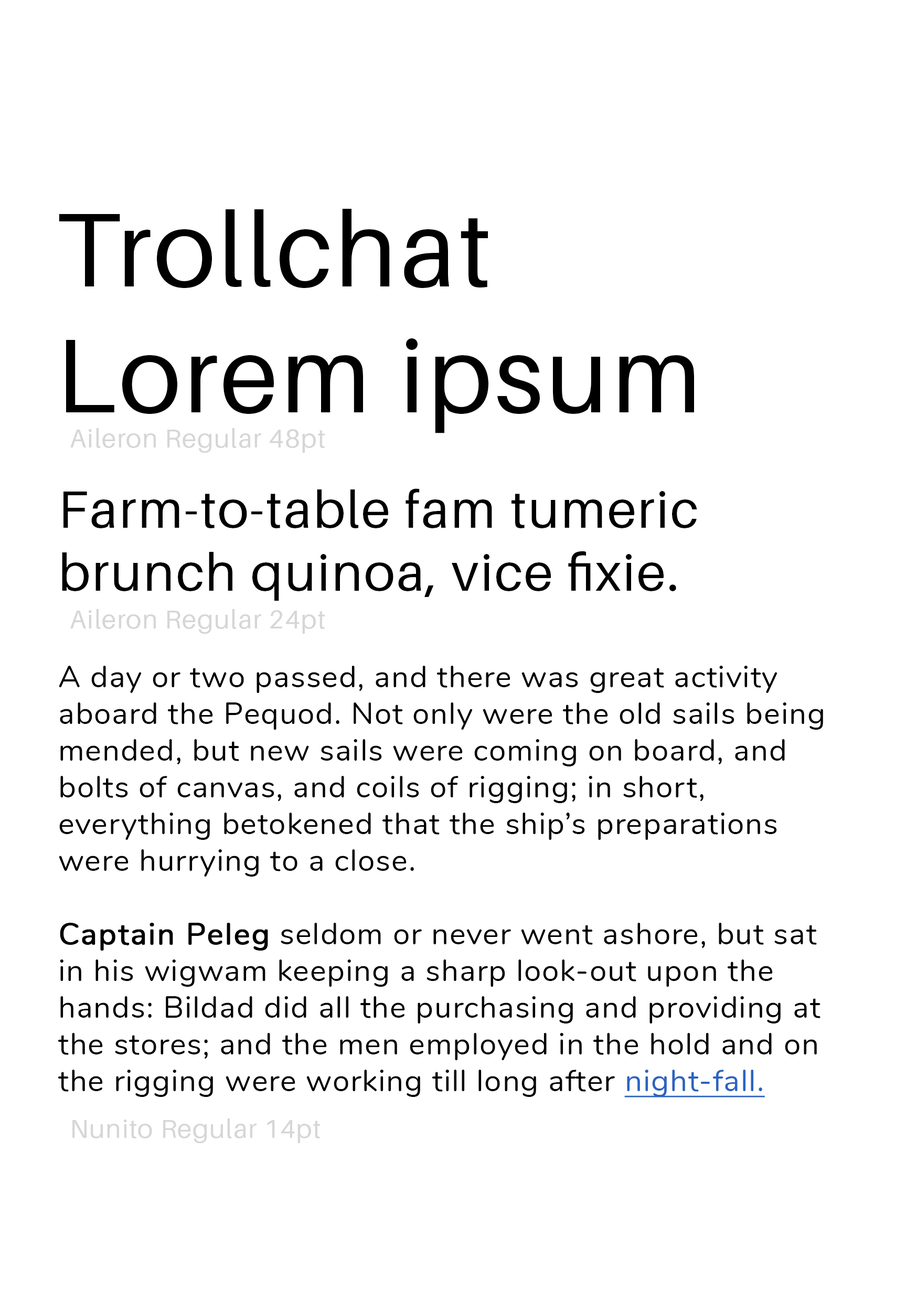
<style>
.page{position:relative;width:917px;height:1301px;background:#ffffff}
.page>*{position:absolute;margin:0}
.t1{font:104.9px "Aileron-Regular";letter-spacing:0.03em;color:#000000}
.t2{font:26.2px "Aileron-Regular";letter-spacing:0.03em;color:#d6d6d6}
.t3{font:52.4px "Aileron-Regular";letter-spacing:0.03em;color:#000000}
.t4{font:30.6px "Nunito-Regular";letter-spacing:0.03em;color:#000000}
.t5{font:30.6px "Nunito-Regular";letter-spacing:0.03em;color:#000000;font-weight:bold}
.t6{font:30.6px "Nunito-Regular";letter-spacing:0.03em;color:#2a63c1;text-decoration:underline}
</style>
<div class="page">
<p class="t1" style="left:59px;top:209px;width:635px;height:224px">Trollchat<br>Lorem ipsum</p>
<p class="t2" style="left:70px;top:428px;width:255px;height:25px">Aileron Regular 48pt</p>
<p class="t3" style="left:62px;top:488px;width:635px;height:113px">Farm-to-table fam tumeric brunch quinoa, vice fixie.</p>
<p class="t2" style="left:70px;top:609px;width:255px;height:25px">Aileron Regular 24pt</p>
<p class="t4" style="left:58px;top:666px;width:765px;height:431px">A day or two passed, and there was great activity aboard the Pequod. Not only were the old sails being mended, but new sails were coming on board, and bolts of canvas, and coils of rigging; in short, everything betokened that the ship’s preparations were hurrying to a close. <br><br><span class="t5">Captain Peleg</span> seldom or never went ashore, but sat in his wigwam keeping a sharp look-out upon the hands: Bildad did all the purchasing and providing at the stores; and the men employed in the hold and on the rigging were working till long after <span class="t6">night-fall.</span></p>
<p class="t2" style="left:72px;top:1118px;width:248px;height:25px">Nunito Regular 14pt</p>
</div>
